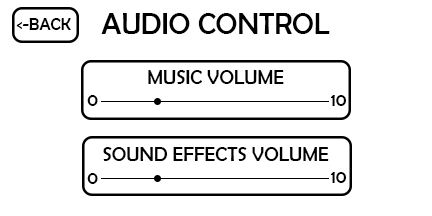
<style>
.page{position:relative;width:432px;height:216px;background:#ffffff}
.page>*{position:absolute;margin:0}
.t1{font:30px "BerlinSansFB-Reg";color:#000000}
.t2{font:17px "BerlinSansFB-Reg";color:#000000}
.t3{font:20px "BerlinSansFB-Reg";color:#000000}
.t4{font:18px "BerlinSansFB-Reg";color:#000000}
</style>
<div class="page">
<p class="t1" style="left:101px;top:13px;width:229px;height:21px">AUDIO CONTROL</p>
<p class="t2" style="left:16px;top:18px;width:55px;height:12px">&lt;-BACK</p>
<p class="t3" style="left:148px;top:70px;width:136px;height:14px">MUSIC VOLUME</p>
<p class="t4" style="left:87px;top:95px;width:11px;height:11px">0</p>
<p class="t4" style="left:330px;top:95px;width:17px;height:11px">10</p>
<p class="t3" style="left:103px;top:147px;width:226px;height:14px">SOUND EFFECTS VOLUME</p>
<p class="t4" style="left:87px;top:173px;width:11px;height:11px">0</p>
<p class="t4" style="left:330px;top:172px;width:17px;height:11px">10</p>
</div>
